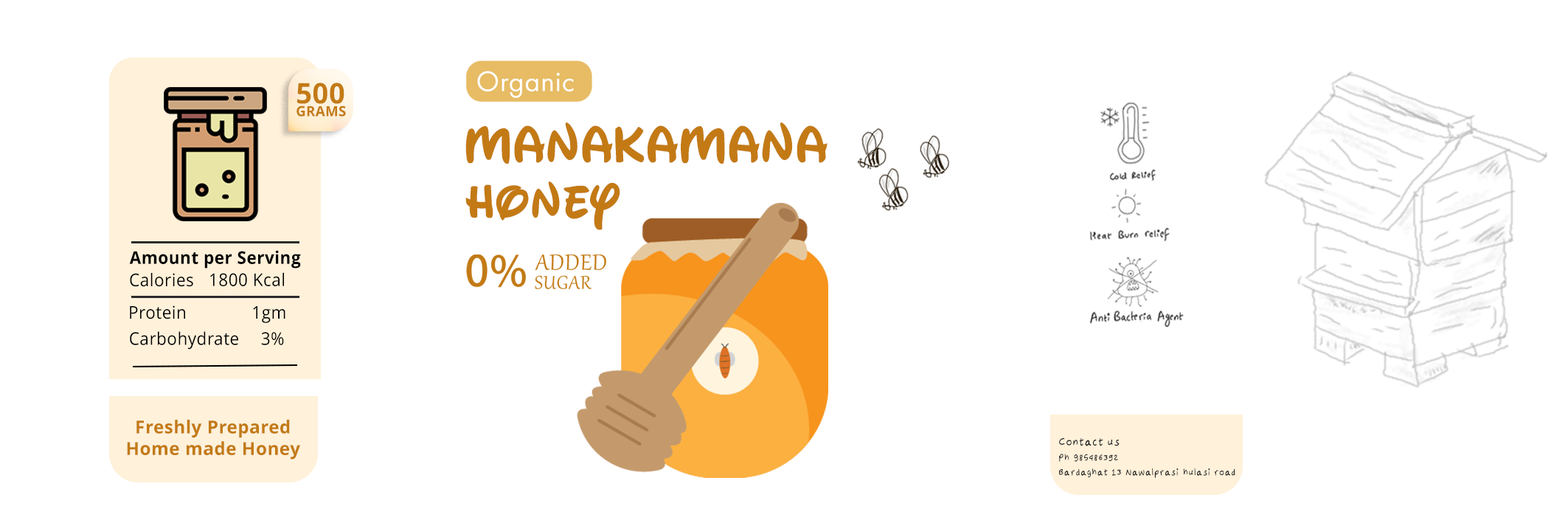
<style>
.page{position:relative;width:1568px;height:523px;background:#ffffff}
.page>*{position:absolute;margin:0}
.t1{font:28.3px "OpenSans-Bold";letter-spacing:0.02em;color:#c37a15}
.t2{font:13.9px "OpenSans-Bold";letter-spacing:0.02em;color:#c37a15}
.t3{font:50.4px "WaltographUI-Bold";letter-spacing:0.02em;color:#c37a15}
.t4{font:46.4px "WaltographUI-Bold";letter-spacing:0.025em;color:#c37a15}
.t5{font:17.5px "OpenSans-Bold";letter-spacing:0.02em;color:#000000;scale:0.95 1}
.t6{font:17.5px "OpenSans";letter-spacing:0.02em;color:#000000;scale:0.95 1}
.t7{font:17.9px "OpenSans-Bold";letter-spacing:0.02em;color:#c37a15}
.t8{font:14.6px "Handwriting-Regular";letter-spacing:0.02em;color:#2b2b2b}
.t9{font:12.1px "Handwriting-Regular";letter-spacing:0.02em;color:#2b2b2b}
</style>
<div class="page">
<p class="t1" style="left:297px;top:83px;width:47px;height:21px">500</p>
<p class="t2" style="left:296px;top:105px;width:50px;height:12px">GRAMS</p>
<p class="t3" style="left:465px;top:122px;width:363px;height:42px">Manakamana</p>
<p class="t4" style="left:465px;top:181px;width:155px;height:49px">HONEY</p>
<p class="t5" style="left:129px;top:250px;width:172px;height:18px">Amount per Serving</p>
<p class="t6" style="left:130px;top:273px;width:63px;height:14px">Calories</p>
<p class="t6" style="left:210px;top:272px;width:74px;height:14px">1800 Kcal</p>
<p class="t6" style="left:130px;top:305px;width:55px;height:14px">Protein</p>
<p class="t6" style="left:253px;top:306px;width:32px;height:17px">1gm</p>
<p class="t6" style="left:130px;top:331px;width:108px;height:19px">Carbohydrate</p>
<p class="t6" style="left:261px;top:332px;width:23px;height:13px">3%</p>
<p class="t7" style="left:127px;top:420px;width:173px;height:39px;text-align:center">Freshly Prepared<br>Home made Honey</p>
<p class="t8" style="left:1059px;top:437px;width:61px;height:9px">Contact us</p>
<p class="t9" style="left:1059px;top:454px;width:176px;height:24px">Ph 985486392<br>Bardaghat 13 Nawalprasi hulasi road</p>
</div>
